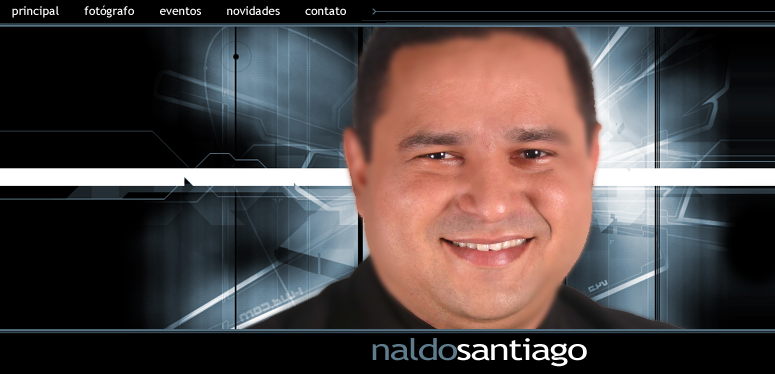
<style>
.page{position:relative;width:775px;height:374px;background:#000000}
.page>*{position:absolute;margin:0}
.t1{font:12px "TrebuchetMS";color:#ffffff}
.t2{font:30px "TrebuchetMS";letter-spacing:-0.05em;color:#ffffff;scale:1.3 1}
.t3{font:30px "TrebuchetMS";letter-spacing:-0.05em;color:#5f7c8c;scale:1.3 1}
</style>
<div class="page">
<p class="t1" style="left:12px;top:5px;width:334px;height:13px">principal       fotógrafo       eventos       novidades       contato</p>
<p class="t2" style="left:372px;top:338px;width:215px;height:29px"><span class="t3">naldo</span>santiago</p>
</div>
